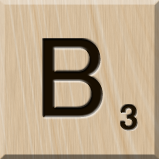
<style>
.page{position:relative;width:159px;height:159px}
.page>*{position:absolute;margin:0}
.t1{font:116px "MS-UIGothic";color:#180e01}
.t2{font:36px "MS-UIGothic";color:#1c1101;font-weight:bold;scale:1.1 1}
</style>
<div class="page">
<p class="t1" style="left:43px;top:39px;width:60px;height:79px">B</p>
<p class="t2" style="left:120px;top:104px;width:18px;height:27px">3</p>
</div>
